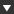
<style>
.page{position:relative;width:14px;height:14px;background:#333333}
.page>*{position:absolute;margin:0}
.t1{font:9px "Seoul-Headline";color:#ffffff}
</style>
<div class="page">
<p class="t1" style="left:3px;top:5px;width:8px;height:7px">▼</p>
</div>
